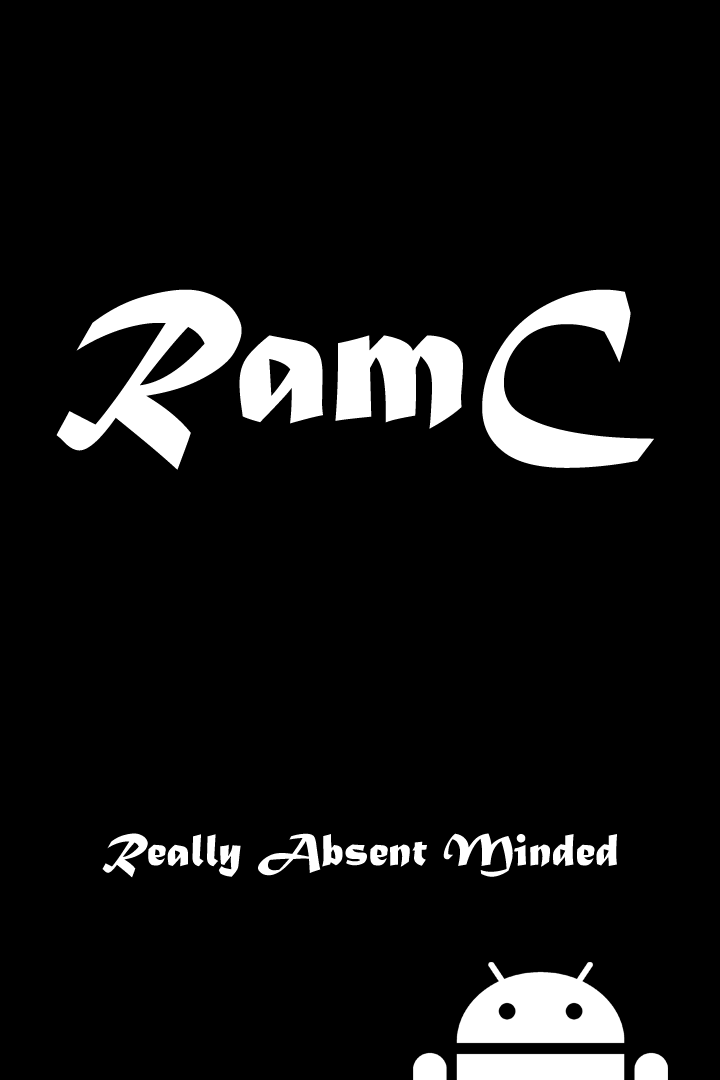
<style>
.page{position:relative;width:720px;height:1080px;background:#000000}
.page>*{position:absolute;margin:0}
.t1{font:196px "MaturaMTScriptCapitals";color:#ffffff}
.t2{font:48px "MaturaMTScriptCapitals";color:#ffffff}
</style>
<div class="page">
<p class="t1" style="left:56px;top:289px;width:598px;height:181px">RamC</p>
<p class="t2" style="left:102px;top:833px;width:515px;height:45px">Really Absent Minded</p>
</div>
